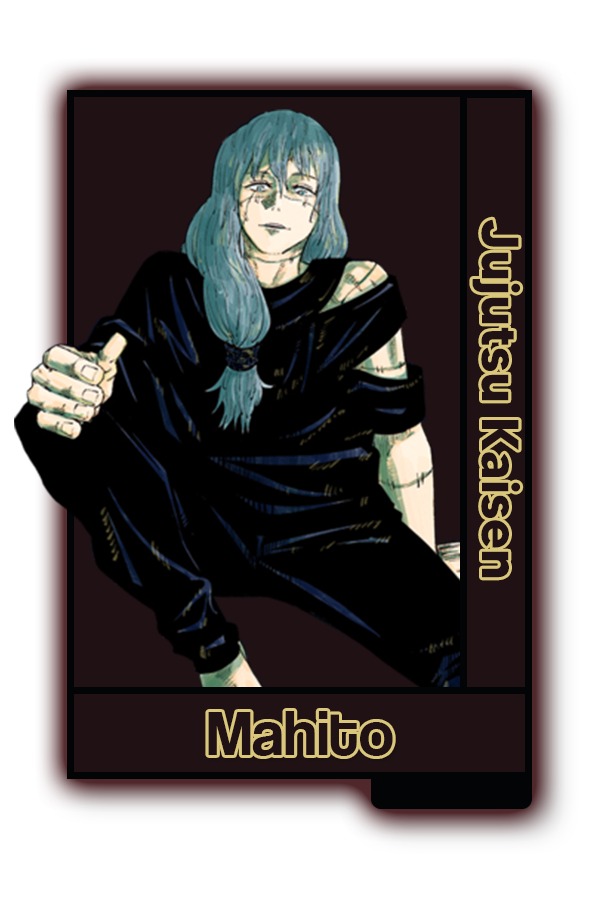
<style>
.page{position:relative;width:600px;height:900px;background:#1f1114}
.page>*{position:absolute;margin:0}
.t1{font:52px "MADETOMMY-Bold";color:#1e1214}
.t2{font:65.2px "CoolveticaRg-Regular";color:#1e1214}
</style>
<div class="page">
<p class="t1" style="left:472px;top:219px;width:49px;height:359px;rotate:90deg">Jujutsu Kaisen</p>
<p class="t2" style="left:208px;top:711px;width:185px;height:45px">Mahito</p>
</div>
